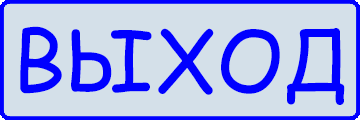
<style>
.page{position:relative;width:360px;height:120px;background:#d4e0e9}
.page>*{position:absolute;margin:0}
.t1{font:84px "ComicSansMS";color:#0000ff}
</style>
<div class="page">
<p class="t1" style="left:20px;top:26px;width:325px;height:79px">ВЫХОДИ</p>
</div>
